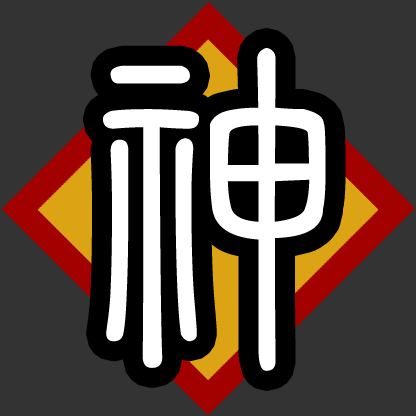
<style>
.page{position:relative;width:416px;height:416px;background:#333333}
.page>*{position:absolute;margin:0}
.t1{font:373.4px "DFNewChuan-Md-HKP-BF";color:#ffffff}
</style>
<div class="page">
<p class="t1" style="left:103px;top:47px;width:223px;height:324px">神</p>
</div>
